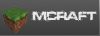
<style>
.page{position:relative;width:100px;height:36px}
.page>*{position:absolute;margin:0}
.t1{font:12px "Defused-ExtendedBold";color:#eaeaea}
</style>
<div class="page">
<p class="t1" style="left:31px;top:10px;width:66px;height:12px">MCRAFT</p>
</div>
